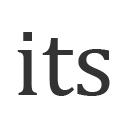
<style>
.page{position:relative;width:128px;height:128px;background:#ffffff}
.page>*{position:absolute;margin:0}
.t1{font:96px "CambriaMath";color:#333333}
</style>
<div class="page">
<p class="t1" style="left:17px;top:32px;width:93px;height:64px">its</p>
</div>
